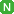
<style>
.page{position:relative;width:14px;height:14px;background:#3dad36}
.page>*{position:absolute;margin:0}
.t1{font:11px "ArialMT";letter-spacing:-0.01em;color:#ffffff}
</style>
<div class="page">
<p class="t1" style="left:3px;top:2px;width:8px;height:13px">N</p>
</div>
